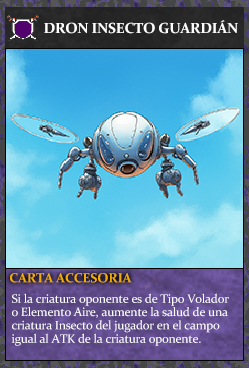
<style>
.page{position:relative;width:249px;height:368px}
.page>*{position:absolute;margin:0}
.t1{font:14.7px "Constantia-Bold";letter-spacing:-0.02em;color:#ffffff}
.t2{font:13.3px "Constantia-Bold";letter-spacing:-0.02em;color:#f2ac05}
.t3{font:12.3px/13.3px "Constantia";letter-spacing:-0.02em;color:#ffffff}
</style>
<div class="page">
<p class="t1" style="left:44px;top:20px;width:194px;height:14px">DRON INSECTO GUARDIÁN</p>
<p class="t2" style="left:10px;top:273px;width:122px;height:10px">CARTA ACCESORIA</p>
<p class="t3" style="left:11px;top:293px;width:218px;height:53px">Si la criatura oponente es de Tipo Volador<br>o Elemento Aire, aumente la salud de una<br>criatura Insecto del jugador en el campo<br>igual al ATK de la criatura oponente.</p>
</div>
